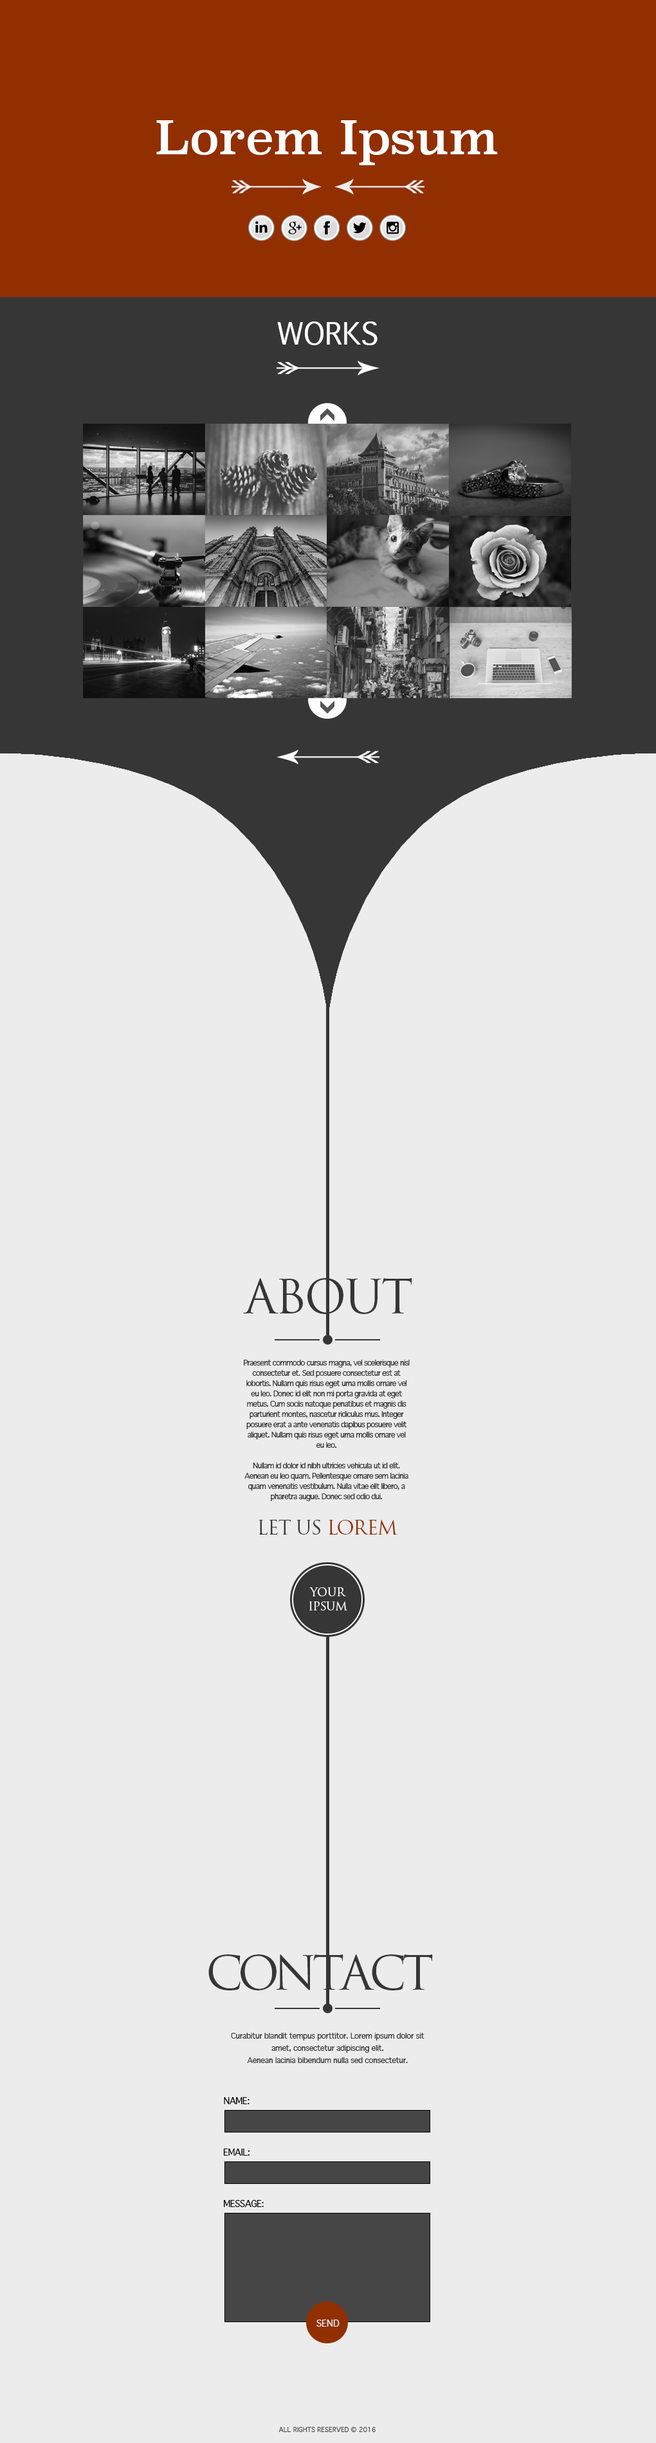
<style>
.page{position:relative;width:656px;height:2443px;background:#ececec}
.page>*{position:absolute;margin:0}
.t1{font:46.4px "Superclarendon-Regular";letter-spacing:-0.005em;color:#ffffff}
.t2{font:28.9px "Geneva";letter-spacing:-0.005em;color:#ffffff;text-transform:uppercase}
.t3{font:46.3px "TrajanPro-Regular";letter-spacing:-0.045em;color:#363636;text-transform:uppercase}
.t4{font:7.7px/10.3px "Geneva";letter-spacing:-0.085em;color:#363636}
.t5{font:19.3px "TrajanPro-Regular";letter-spacing:-0.045em;color:#363636;text-transform:uppercase}
.t6{font:19.3px "TrajanPro-Regular";letter-spacing:-0.045em;color:#912f00;text-transform:uppercase}
.t7{font:11.6px/14.1px "TrajanPro-Regular";letter-spacing:-0.045em;color:#ffffff;text-transform:uppercase}
.t8{font:46.3px "TrajanPro-Regular";letter-spacing:-0.105em;color:#363636;text-transform:uppercase}
.t9{font:46.3px "TrajanPro-Regular";letter-spacing:-0.085em;color:#363636;text-transform:uppercase}
.t10{font:7.7px/12.2px "Geneva";letter-spacing:-0.045em;color:#363636}
.t11{font:9px "Geneva";letter-spacing:-0.045em;color:#000000;text-transform:uppercase}
.t12{font:9px "Geneva";letter-spacing:-0.005em;color:#ececec;text-transform:uppercase}
.t13{font:6.4px "Geneva";letter-spacing:-0.005em;color:#464646;text-transform:uppercase}
</style>
<div class="page">
<p class="t1" style="left:156px;top:120px;width:342px;height:45px">Lorem Ipsum</p>
<p class="t2" style="left:277px;top:321px;width:100px;height:24px">works</p>
<p class="t3" style="left:243px;top:1278px;width:169px;height:36px">About</p>
<p class="t4" style="left:244px;top:1360px;width:166px;height:141px;text-align:center">Praesent commodo cursus magna, vel scelerisque nisl consectetur et. Sed posuere consectetur est at lobortis. Nullam quis risus eget urna mollis ornare vel eu leo. Donec id elit non mi porta gravida at eget metus. Cum sociis natoque penatibus et magnis dis parturient montes, nascetur ridiculus mus. Integer posuere erat a ante venenatis dapibus posuere velit aliquet. Nullam quis risus eget urna mollis ornare vel eu leo.<br><br>Nullam id dolor id nibh ultricies vehicula ut id elit. Aenean eu leo quam. Pellentesque ornare sem lacinia quam venenatis vestibulum. Nulla vitae elit libero, a pharetra augue. Donec sed odio dui.</p>
<p class="t5" style="left:258px;top:1520px;width:139px;height:14px">let us <span class="t6">lorem</span></p>
<p class="t7" style="left:309px;top:1587px;width:38px;height:23px;text-align:center">Your<br>Ipsum</p>
<p class="t8" style="left:208px;top:1954px;width:225px;height:36px">Con<span class="t3">t</span><span class="t9">act</span></p>
<p class="t10" style="left:231px;top:2033px;width:193px;height:30px;text-align:center">Curabitur blandit tempus porttitor. Lorem ipsum dolor sit amet, consectetur adipiscing elit. <br>Aenean lacinia bibendum nulla sed consectetur.</p>
<p class="t11" style="left:224px;top:2097px;width:25px;height:7px">name:</p>
<p class="t11" style="left:223px;top:2148px;width:26px;height:8px">email:</p>
<p class="t11" style="left:224px;top:2200px;width:40px;height:7px">message:</p>
<p class="t12" style="left:316px;top:2319px;width:23px;height:7px">Send</p>
<p class="t13" style="left:278px;top:2426px;width:97px;height:7px">all rights reserved © 2016</p>
</div>
